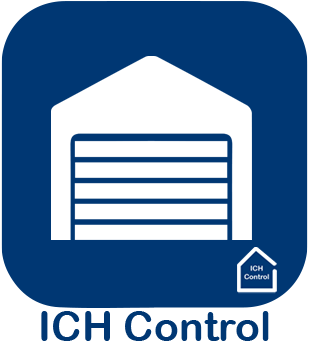
<style>
.page{position:relative;width:309px;height:348px;background:#003773}
.page>*{position:absolute;margin:0}
.t1{font:41.3px "ArialRoundedMTBold";color:#003773}
</style>
<div class="page">
<p class="t1" style="left:41px;top:311px;width:228px;height:30px">ICH Control</p>
</div>
